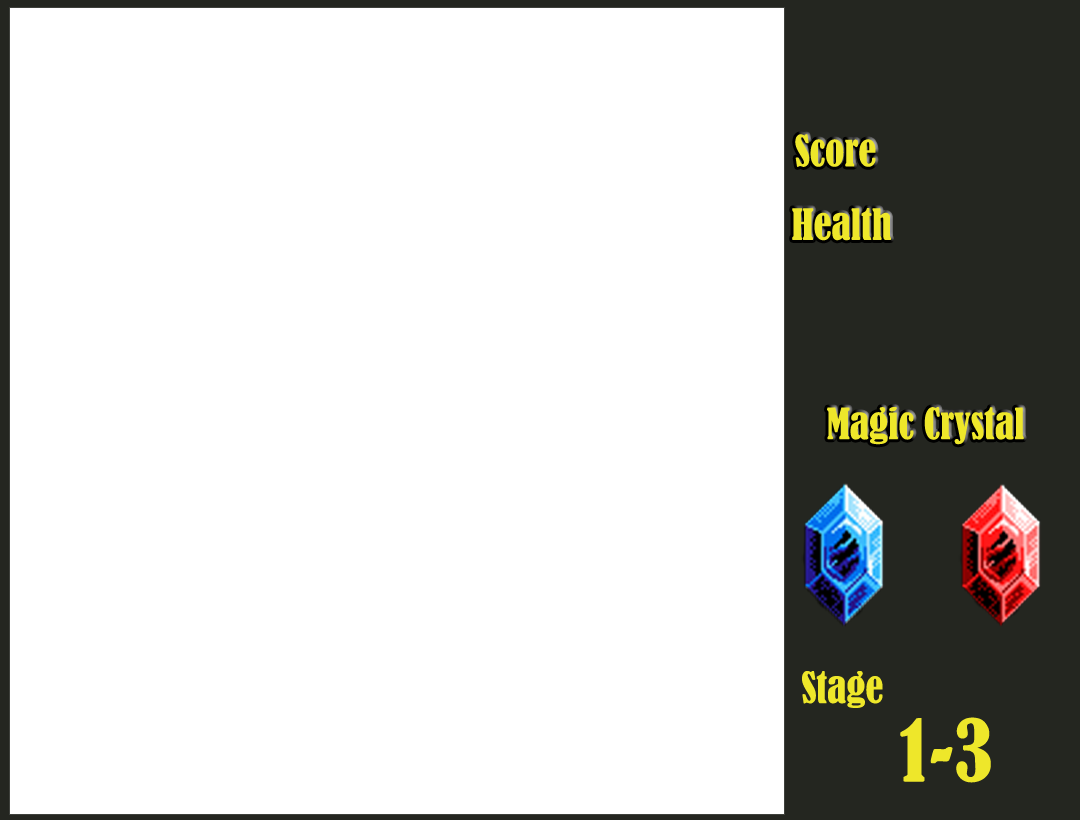
<style>
.page{position:relative;width:1080px;height:820px;background:#ffffff}
.page>*{position:absolute;margin:0}
.t1{font:40px "BernardMT-Condensed";color:#eee72a}
.t2{font:80px "BernardMT-Condensed";color:#eee72a}
</style>
<div class="page">
<p class="t1" style="left:795px;top:134px;width:81px;height:33px">Score</p>
<p class="t1" style="left:792px;top:208px;width:99px;height:33px">Health</p>
<p class="t1" style="left:827px;top:407px;width:197px;height:38px">Magic Crystal</p>
<p class="t1" style="left:802px;top:671px;width:81px;height:37px">Stage</p>
<p class="t2" style="left:900px;top:717px;width:91px;height:66px">1-3</p>
</div>
